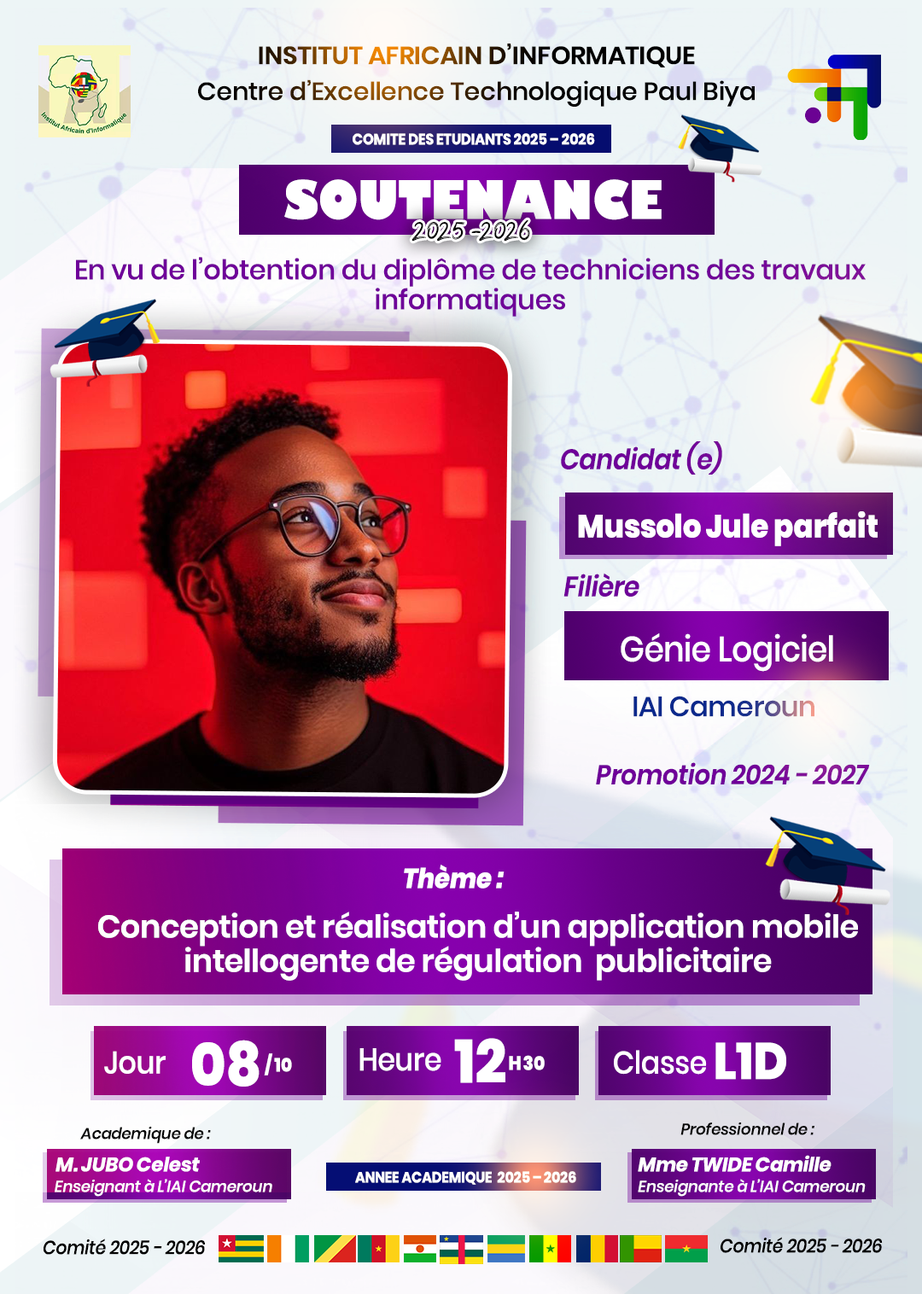
<style>
.page{position:relative;width:922px;height:1294px}
.page>*{position:absolute;margin:0}
.t1{font:24.7px/35.9px "Poppins-Medium";letter-spacing:-0.01em}
.t2{font:24.7px/35.9px "Poppins-SemiBold";letter-spacing:-0.01em}
.t3{font:15.2px "Poppins-Bold";letter-spacing:-0.01em;color:#ffffff;scale:0.91 1}
.t4{font:51.8px "GillSans-UltraBold";letter-spacing:-0.01em;color:#ffffff;scale:0.91 1}
.t5{font:31.3px "BassyRegular";letter-spacing:-0.01em;color:#000000;scale:0.91 1}
.t6{font:27.4px "Poppins-Medium";letter-spacing:-0.01em;color:#6f0099}
.t7{font:28.1px "Poppins-SemiBoldItalic";letter-spacing:-0.01em;color:#6f0099;scale:0.91 1}
.t8{font:32px "Poppins-ExtraBold";letter-spacing:-0.01em;color:#ffffff;scale:0.91 1}
.t9{font:35.2px "Poppins-Medium";letter-spacing:-0.01em;color:#ffffff;scale:0.91 1}
.t10{font:27.6px "Poppins-Medium";letter-spacing:-0.01em;color:#0b298c}
.t11{font:27.4px "Poppins-SemiBoldItalic";letter-spacing:-0.01em;color:#6f0099;scale:0.91 1}
.t12{font:27.4px "Poppins-ExtraBoldItalic";letter-spacing:-0.01em;color:#ffffff;scale:0.91 1}
.t13{font:31.4px "Poppins-SemiBold";letter-spacing:-0.01em;color:#ffffff}
.t14{font:61.1px "Poppins-ExtraBold";letter-spacing:-0.01em;color:#ffffff;scale:0.91 1}
.t15{font:60.3px "Poppins-ExtraBold";letter-spacing:-0.01em;color:#ffffff;scale:0.91 1}
.t16{font:31.3px "Poppins-Medium";letter-spacing:-0.01em;color:#ffffff;scale:0.91 1}
.t17{font:51.2px "Poppins-ExtraBold";letter-spacing:-0.01em;color:#ffffff;scale:0.91 1}
.t18{font:18.8px "Poppins-ExtraBold";letter-spacing:-0.01em;color:#ffffff;scale:0.91 1}
.t19{font:19.1px "Poppins-ExtraBold";letter-spacing:-0.01em;color:#ffffff;scale:0.91 1}
.t20{font:15.6px "Poppins-MediumItalic";letter-spacing:-0.01em;color:#060606}
.t21{font:19.6px "Poppins-BoldItalic";letter-spacing:-0.01em;color:#ffffff}
.t22{font:15.6px "Poppins-MediumItalic";letter-spacing:-0.01em;color:#ffffff}
.t23{font:15px "Poppins-Bold";letter-spacing:-0.01em;color:#ffffff;scale:0.91 1}
.t24{font:15.6px "Poppins-MediumItalic";letter-spacing:-0.01em;color:#fdfdfd}
.t25{font:19px "Poppins-MediumItalic";letter-spacing:-0.01em;color:#000000;scale:0.91 1}
</style>
<div class="page">
<p class="t1" style="left:198px;top:44px;width:556px;height:63px;text-align:center"><span class="t2">INSTITUT AFRICAIN D’INFORMATIQUE<br></span>Centre d’Excellence Technologique Paul Biya</p>
<p class="t3" style="left:352px;top:133px;width:243px;height:12px">COMITE DES ETUDIANTS 2025 – 2026</p>
<p class="t4" style="left:284px;top:179px;width:377px;height:41px">SOUTENANCE</p>
<p class="t5" style="left:411px;top:219px;width:119px;height:23px">2025 -2026</p>
<p class="t6" style="left:76px;top:257px;width:789px;height:60px;text-align:center">En vu de l’obtention du diplôme de techniciens des travaux<br>informatiques</p>
<p class="t7" style="left:561px;top:441px;width:161px;height:33px">Candidat (e)</p>
<p class="t8" style="left:578px;top:511px;width:299px;height:35px">Mussolo Jule parfait</p>
<p class="t7" style="left:563px;top:573px;width:76px;height:24px">Filière</p>
<p class="t9" style="left:620px;top:633px;width:213px;height:39px">Génie Logiciel</p>
<p class="t10" style="left:633px;top:696px;width:181px;height:21px">IAI Cameroun</p>
<p class="t11" style="left:596px;top:762px;width:274px;height:23px">Promotion 2024 - 2027</p>
<p class="t12" style="left:404px;top:864px;width:100px;height:24px">Thème :</p>
<p class="t13" style="left:98px;top:911px;width:760px;height:70px;text-align:center">Conception et réalisation d’un application mobile<br>intellogente de régulation  publicitaire</p>
<p class="t14" style="left:454px;top:1038px;width:51px;height:45px">12</p>
<p class="t15" style="left:192px;top:1039px;width:67px;height:47px">08</p>
<p class="t16" style="left:359px;top:1048px;width:82px;height:23px">Heure</p>
<p class="t16" style="left:614px;top:1050px;width:93px;height:24px">Classe</p>
<p class="t17" style="left:715px;top:1042px;width:71px;height:38px">L1D</p>
<p class="t16" style="left:104px;top:1051px;width:62px;height:23px">Jour</p>
<p class="t18" style="left:264px;top:1053px;width:28px;height:22px">/ 10</p>
<p class="t19" style="left:509px;top:1056px;width:12px;height:14px">H</p>
<p class="t19" style="left:523px;top:1055px;width:21px;height:15px">30</p>
<p class="t20" style="left:80px;top:1126px;width:131px;height:18px">Academique de :</p>
<p class="t20" style="left:680px;top:1122px;width:134px;height:13px">Professionnel de :</p>
<p class="t21" style="left:55px;top:1156px;width:145px;height:16px">M. JUBO Celest</p>
<p class="t21" style="left:637px;top:1155px;width:194px;height:17px">Mme TWIDE Camille</p>
<p class="t22" style="left:55px;top:1179px;width:217px;height:17px">Enseignant à L’IAI Cameroun</p>
<p class="t23" style="left:355px;top:1171px;width:221px;height:14px">ANNEE ACADEMIQUE  2025 – 2026</p>
<p class="t24" style="left:637px;top:1179px;width:228px;height:17px">Enseignante à L’IAI Cameroun</p>
<p class="t25" style="left:44px;top:1238px;width:161px;height:17px">Comité 2025 - 2026</p>
<p class="t25" style="left:720px;top:1237px;width:162px;height:16px">Comité 2025 - 2026</p>
</div>
